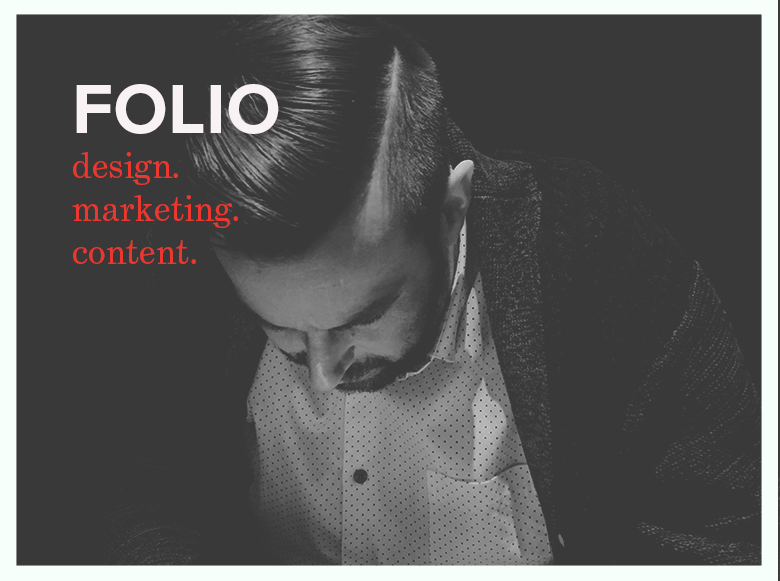
<style>
.page{position:relative;width:780px;height:581px;background:#3a3939}
.page>*{position:absolute;margin:0}
.t1{font:72px "ProximaNova-Bold";color:#f8f2f5}
.t2{font:36px "Grad";color:#ed362e}
</style>
<div class="page">
<p class="t1" style="left:76px;top:84px;width:203px;height:50px">FOLIO</p>
<p class="t2" style="left:72px;top:152px;width:166px;height:112px">design.<br>marketing.<br>content.</p>
</div>
